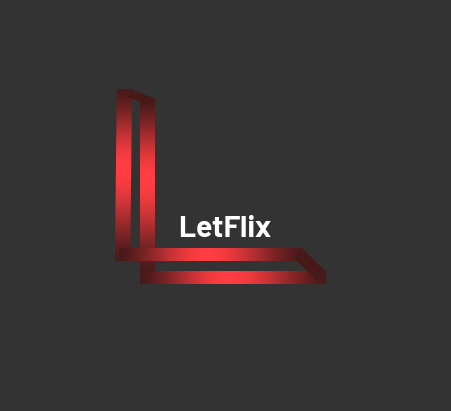
<style>
.page{position:relative;width:451px;height:411px;background:#333333}
.page>*{position:absolute;margin:0}
.t1{font:30px "Barlow-Bold";color:#ffffff}
</style>
<div class="page">
<p class="t1" style="left:180px;top:215px;width:91px;height:22px">LetFlix</p>
</div>
